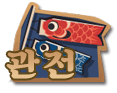
<style>
.page{position:relative;width:117px;height:93px;background:#ffffff}
.page>*{position:absolute;margin:0}
.t1{font:32.6px "SDKukdetopokki-bBd";letter-spacing:0.08em;color:#d8ac7b;scale:1.12 1}
</style>
<div class="page">
<p class="t1" style="left:6px;top:49px;width:68px;height:30px">관전</p>
</div>
